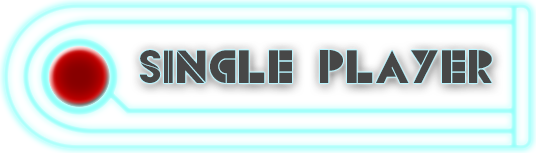
<style>
.page{position:relative;width:536px;height:153px}
.page>*{position:absolute;margin:0}
.t1{font:48px "CSBlocks";color:#474747}
</style>
<div class="page">
<p class="t1" style="left:140px;top:50px;width:352px;height:33px">SINGLE PLAYER</p>
</div>
